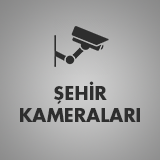
<style>
.page{position:relative;width:160px;height:160px}
.page>*{position:absolute;margin:0}
.t1{font:18px "Futura-Bold";color:#2e2e2e}
</style>
<div class="page">
<p class="t1" style="left:20px;top:81px;width:120px;height:41px;text-align:center">ŞEHİR<br>KAMERALARI</p>
</div>
